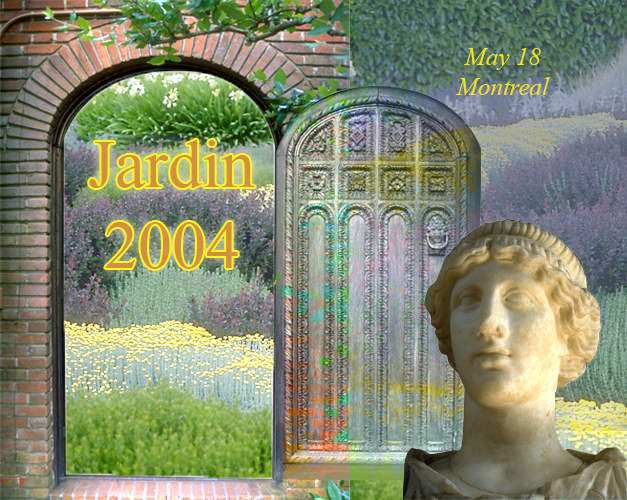
<style>
.page{position:relative;width:627px;height:500px}
.page>*{position:absolute;margin:0}
.t1{font:25px "TimesNewRomanPS-ItalicMT";color:#f3e312}
.t2{font:67.7px "TimesNewRomanPSMT";color:#d3903f}
</style>
<div class="page">
<p class="t1" style="left:456px;top:48px;width:94px;height:47px;text-align:center">May 18<br>Montreal</p>
<p class="t2" style="left:89px;top:140px;width:166px;height:129px;text-align:center">Jardin<br>2004</p>
</div>
